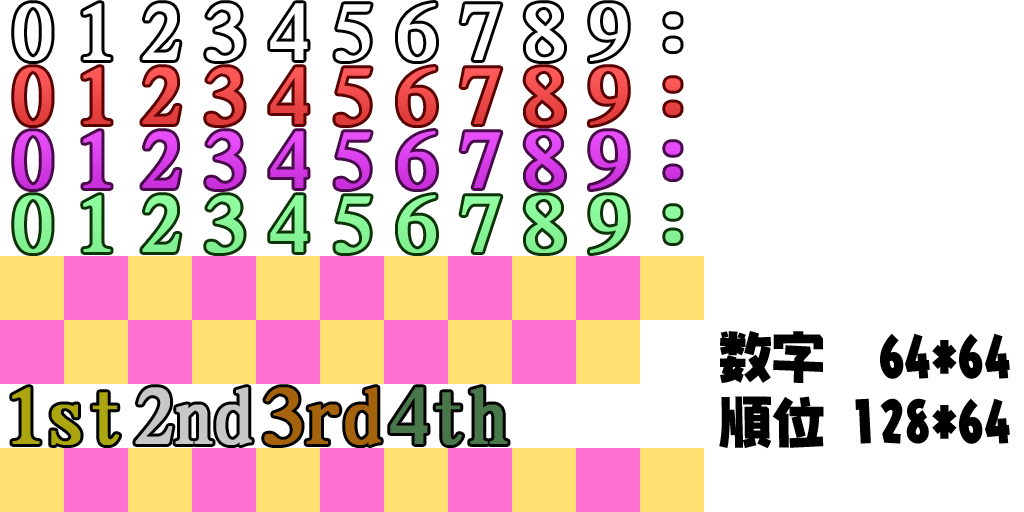
<style>
.page{position:relative;width:1024px;height:512px;background:#ffffff}
.page>*{position:absolute;margin:0}
.t1{font:75.8px "DFLeiGaSo-W5-WIN-RKSJ-H";color:#ffffff;font-weight:bold}
.t2{font:75.8px "DFLeiGaSo-W5-WIN-RKSJ-H";color:#ff4242;font-weight:bold}
.t3{font:75.8px "DFLeiGaSo-W5-WIN-RKSJ-H";color:#ed4949;font-weight:bold}
.t4{font:75.8px "DFLeiGaSo-W5-WIN-RKSJ-H";color:#e74343;font-weight:bold}
.t5{font:75.8px "DFLeiGaSo-W5-WIN-RKSJ-H";color:#e535fa;font-weight:bold}
.t6{font:75.8px "DFLeiGaSo-W5-WIN-RKSJ-H";color:#d63de8;font-weight:bold}
.t7{font:75.8px "DFLeiGaSo-W5-WIN-RKSJ-H";color:#d73ee9;font-weight:bold}
.t8{font:75.8px "DFLeiGaSo-W5-WIN-RKSJ-H";color:#d93feb;font-weight:bold}
.t9{font:75.8px "DFLeiGaSo-W5-WIN-RKSJ-H";color:#da40ec;font-weight:bold}
.t10{font:75.8px "DFLeiGaSo-W5-WIN-RKSJ-H";color:#e148f3;font-weight:bold}
.t11{font:75.8px "DFLeiGaSo-W5-WIN-RKSJ-H";color:#d138e3;font-weight:bold}
.t12{font:75.8px "DFLeiGaSo-W5-WIN-RKSJ-H";color:#80ff92;font-weight:bold}
.t13{font:52.9px "NIS-JYA-U-83pv-RKSJ-H";color:#000000}
.t14{font:75.8px "DFLeiGaSo-W5-WIN-RKSJ-H";color:#aba60f;font-weight:bold}
.t15{font:75.8px "DFLeiGaSo-W5-WIN-RKSJ-H";color:#a4620d;font-weight:bold}
.t16{font:75.8px "DFLeiGaSo-W5-WIN-RKSJ-H";color:#487849;font-weight:bold}
</style>
<div class="page">
<p class="t1" style="left:14px;top:3px;width:38px;height:58px">0</p>
<p class="t1" style="left:83px;top:3px;width:28px;height:57px">1</p>
<p class="t1" style="left:142px;top:3px;width:38px;height:57px">2</p>
<p class="t1" style="left:206px;top:3px;width:38px;height:58px">3</p>
<p class="t1" style="left:270px;top:3px;width:38px;height:57px">4</p>
<p class="t1" style="left:335px;top:4px;width:36px;height:57px">5</p>
<p class="t1" style="left:398px;top:3px;width:38px;height:58px">6</p>
<p class="t1" style="left:525px;top:3px;width:39px;height:58px">8</p>
<p class="t1" style="left:590px;top:3px;width:38px;height:58px">9</p>
<p class="t1" style="left:665px;top:14px;width:16px;height:37px">:</p>
<p class="t2" style="left:14px;top:67px;width:38px;height:58px">0</p>
<p class="t2" style="left:83px;top:67px;width:28px;height:57px">1</p>
<p class="t3" style="left:142px;top:67px;width:38px;height:57px">2</p>
<p class="t2" style="left:206px;top:67px;width:38px;height:58px">3</p>
<p class="t2" style="left:270px;top:67px;width:38px;height:57px">4</p>
<p class="t2" style="left:335px;top:68px;width:36px;height:57px">5</p>
<p class="t2" style="left:398px;top:67px;width:38px;height:58px">6</p>
<p class="t2" style="left:461px;top:68px;width:40px;height:56px">7</p>
<p class="t2" style="left:525px;top:67px;width:39px;height:58px">8</p>
<p class="t2" style="left:590px;top:67px;width:38px;height:58px">9</p>
<p class="t4" style="left:665px;top:78px;width:16px;height:37px">:</p>
<p class="t5" style="left:14px;top:131px;width:38px;height:58px">0</p>
<p class="t6" style="left:83px;top:131px;width:28px;height:57px">1</p>
<p class="t7" style="left:142px;top:131px;width:38px;height:57px">2</p>
<p class="t8" style="left:206px;top:131px;width:38px;height:58px">3</p>
<p class="t5" style="left:270px;top:131px;width:38px;height:57px">4</p>
<p class="t9" style="left:335px;top:132px;width:36px;height:57px">5</p>
<p class="t5" style="left:398px;top:131px;width:38px;height:58px">6</p>
<p class="t10" style="left:461px;top:132px;width:40px;height:56px">7</p>
<p class="t5" style="left:525px;top:131px;width:39px;height:58px">8</p>
<p class="t5" style="left:590px;top:131px;width:38px;height:58px">9</p>
<p class="t11" style="left:665px;top:142px;width:16px;height:37px">:</p>
<p class="t12" style="left:14px;top:195px;width:38px;height:58px">0</p>
<p class="t12" style="left:83px;top:195px;width:28px;height:57px">1</p>
<p class="t12" style="left:142px;top:195px;width:38px;height:57px">2</p>
<p class="t12" style="left:206px;top:195px;width:38px;height:58px">3</p>
<p class="t12" style="left:270px;top:195px;width:38px;height:57px">4</p>
<p class="t12" style="left:335px;top:196px;width:36px;height:57px">5</p>
<p class="t12" style="left:398px;top:195px;width:38px;height:58px">6</p>
<p class="t12" style="left:525px;top:195px;width:39px;height:58px">8</p>
<p class="t12" style="left:590px;top:195px;width:38px;height:58px">9</p>
<p class="t12" style="left:665px;top:206px;width:16px;height:37px">:</p>
<p class="t13" style="left:720px;top:331px;width:290px;height:52px">数字　64*64</p>
<p class="t14" style="left:12px;top:387px;width:107px;height:58px">1st</p>
<p class="t15" style="left:264px;top:387px;width:117px;height:58px">3rd</p>
<p class="t16" style="left:390px;top:387px;width:118px;height:58px">4th</p>
<p class="t13" style="left:719px;top:396px;width:291px;height:53px">順位 128*64</p>
</div>
